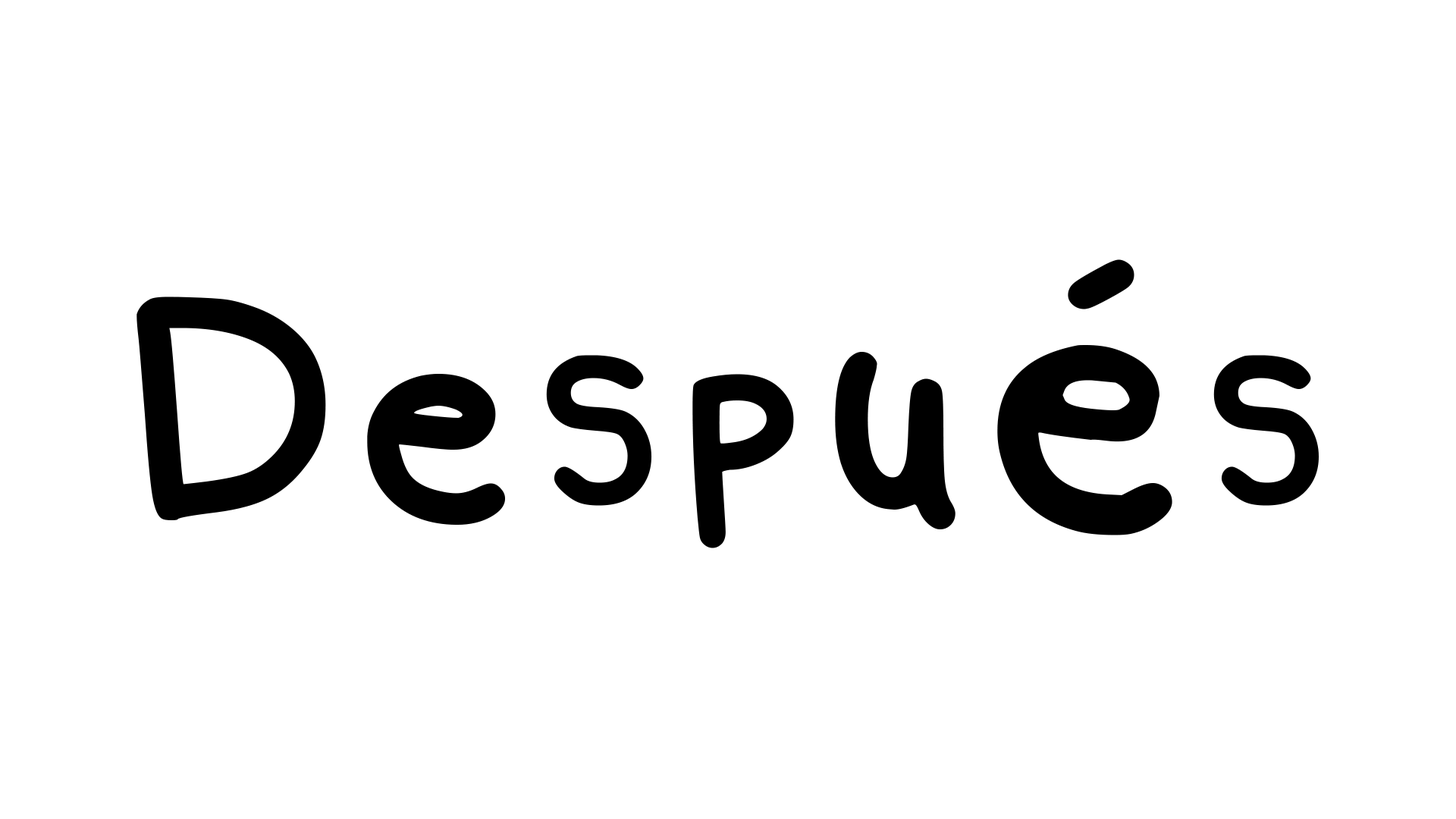
<style>
.page{position:relative;width:1456px;height:819px;background:#ffffff}
.page>*{position:absolute;margin:0}
.t1{font:379.2px "Brutal_bounce-Regular";color:#000000}
</style>
<div class="page">
<p class="t1" style="left:136px;top:259px;width:1183px;height:289px">Después</p>
</div>
